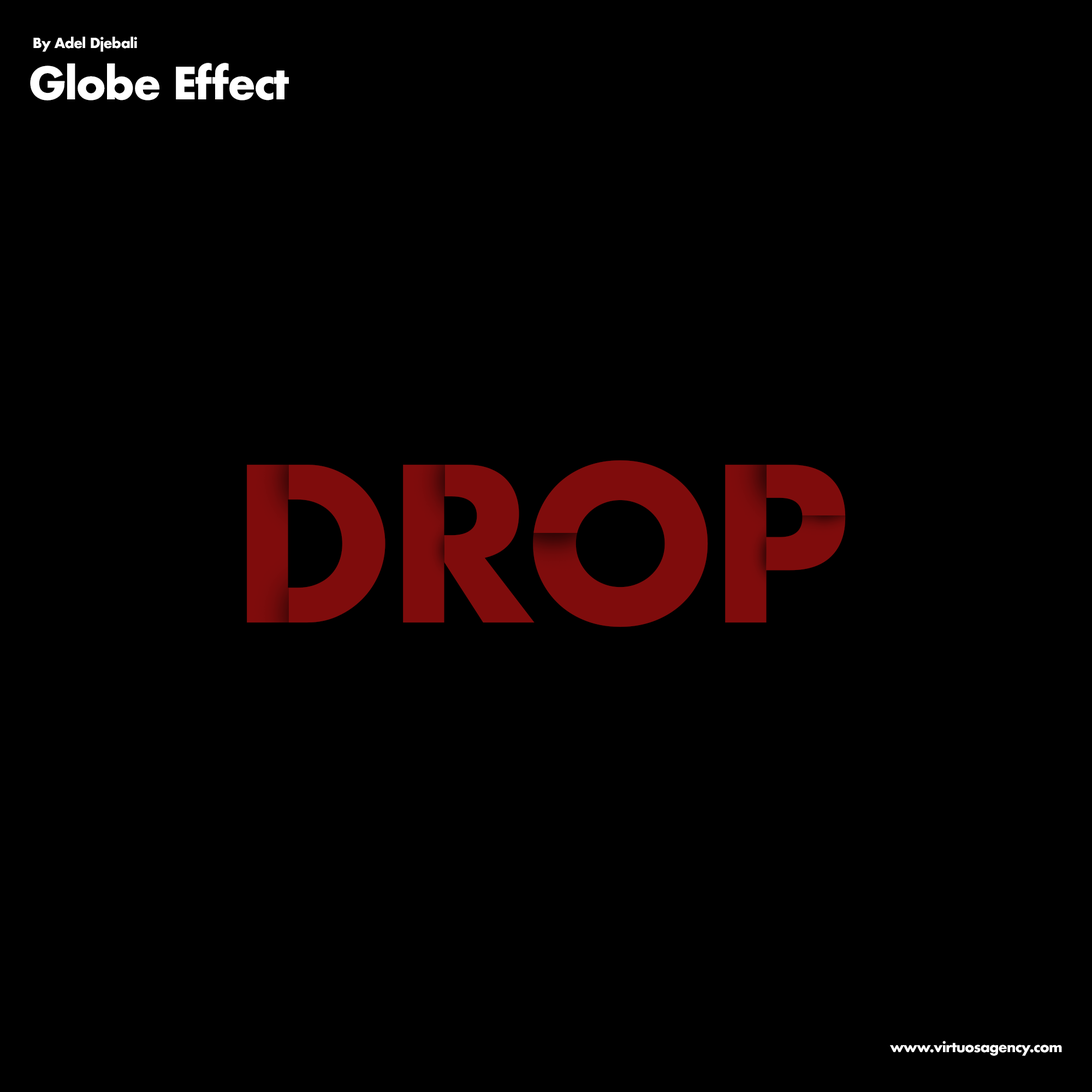
<style>
.page{position:relative;width:1092px;height:1092px;background:#000000}
.page>*{position:absolute;margin:0}
.t1{font:13.6px "Futura-Bold";letter-spacing:-0.04em;color:#ffffff}
.t2{font:43.2px "Futura-Bold";letter-spacing:-0.04em;color:#ffffff}
.t3{font:209.3px "Futura-Bold";letter-spacing:-0.04em;color:#7f0c0c}
</style>
<div class="page">
<p class="t1" style="left:33px;top:37px;width:104px;height:15px">By Adel Djebali</p>
<p class="t2" style="left:30px;top:63px;width:259px;height:37px">Globe Effect</p>
<p class="t3" style="left:247px;top:460px;width:599px;height:167px">DROP</p>
<p class="t1" style="left:890px;top:1041px;width:172px;height:15px">www.virtuosagency.com</p>
</div>
